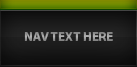
<style>
.page{position:relative;width:137px;height:67px}
.page>*{position:absolute;margin:0}
.t1{font:13px "MyriadPro-Bold";color:#999999}
</style>
<div class="page">
<p class="t1" style="left:24px;top:32px;width:89px;height:9px">NAV TEXT HERE</p>
</div>
